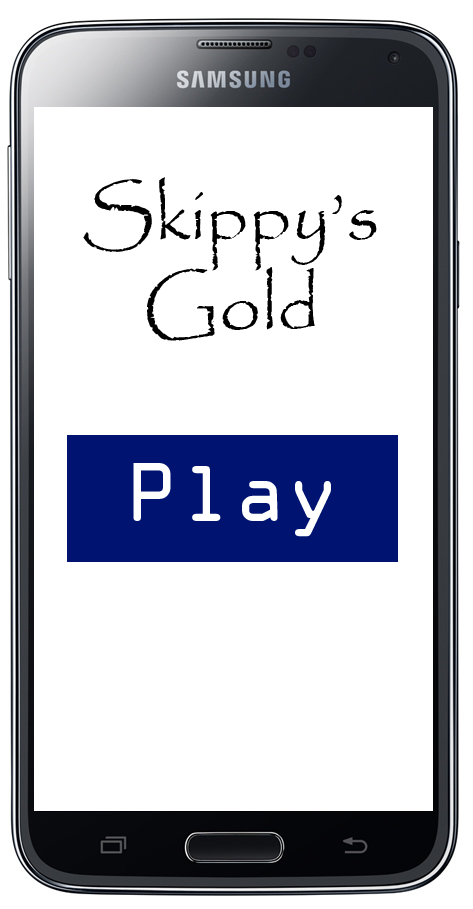
<style>
.page{position:relative;width:473px;height:909px;background:#ffffff}
.page>*{position:absolute;margin:0}
.t1{font:75px "Papyrus-Regular";color:#000000}
.t2{font:75px "OCRAStd";color:#ffffff}
</style>
<div class="page">
<p class="t1" style="left:83px;top:177px;width:294px;height:164px;text-align:center">Skippy’s<br>Gold <span class="t2">Gold</span></p>
<p class="t2" style="left:133px;top:463px;width:198px;height:74px">Play</p>
</div>
